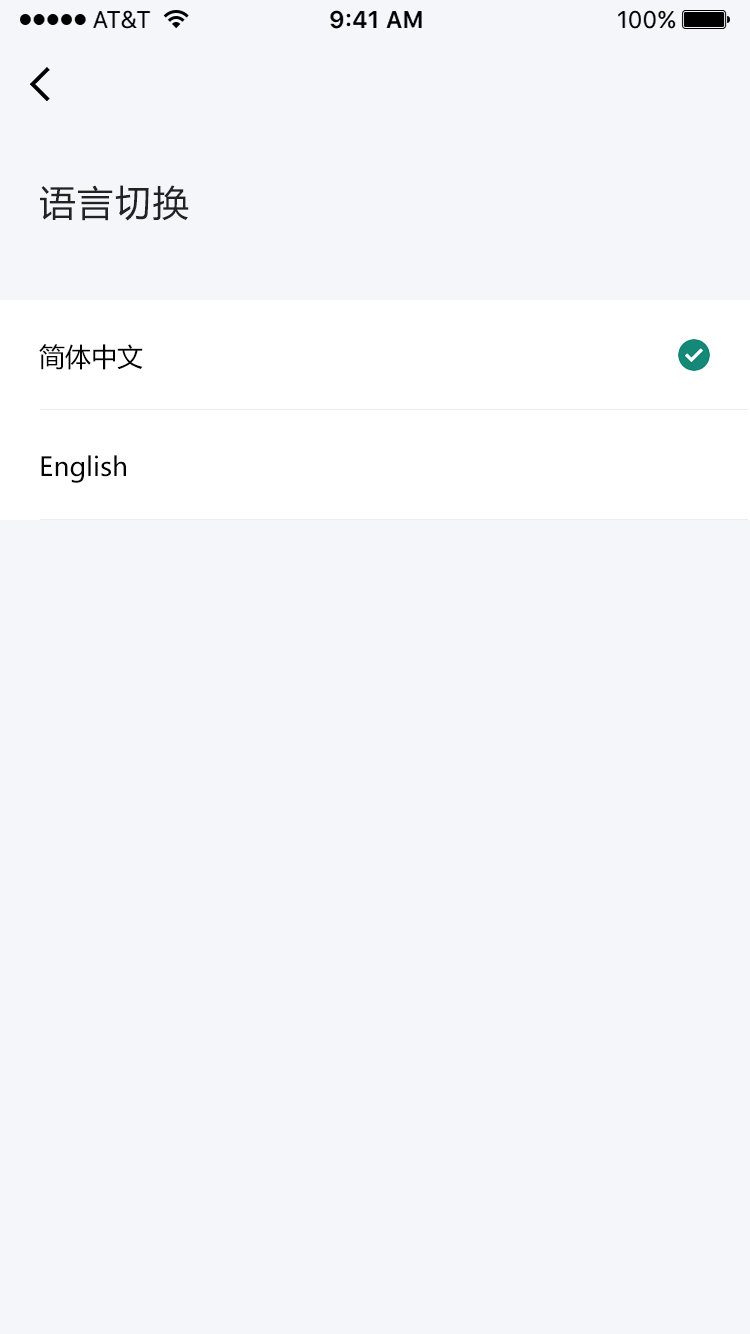
<style>
.page{position:relative;width:750px;height:1334px;background:#f5f6fa}
.page>*{position:absolute;margin:0}
.t1{font:36px "MicrosoftYaHei";letter-spacing:0.05em;color:#222222}
.t2{font:26px "MicrosoftYaHei";color:#000000}
</style>
<div class="page">
<p class="t1" style="left:40px;top:185px;width:149px;height:36px">语言切换</p>
<p class="t2" style="left:39px;top:344px;width:104px;height:26px">简体中文</p>
<p class="t2" style="left:41px;top:455px;width:85px;height:28px">English</p>
</div>
